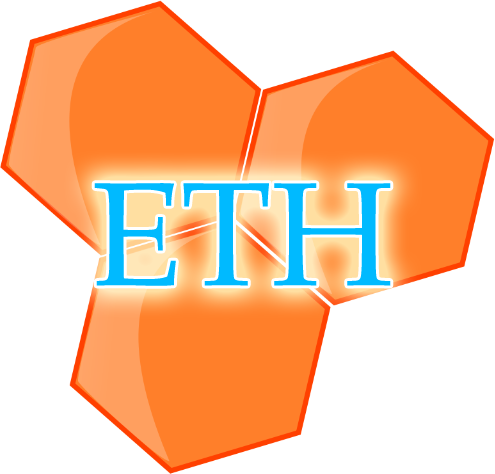
<style>
.page{position:relative;width:495px;height:474px;background:#ffffff}
.page>*{position:absolute;margin:0}
.t1{font:147px "BookAntiqua";color:#00baff}
</style>
<div class="page">
<p class="t1" style="left:94px;top:183px;width:297px;height:103px">ETH</p>
</div>
